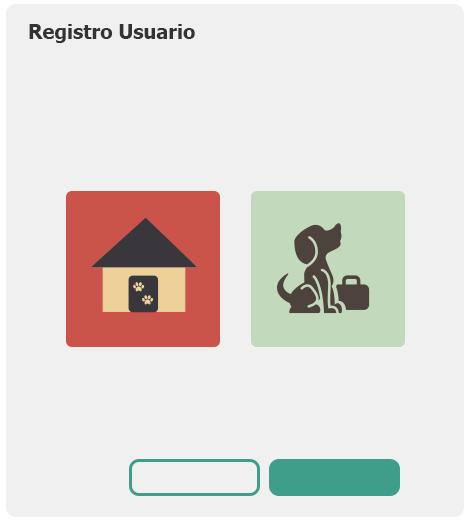
<style>
.page{position:relative;width:470px;height:520px;background:#f0f0f0}
.page>*{position:absolute;margin:0}
.t1{font:20px "Tahoma-Bold";color:#333333}
</style>
<div class="page">
<p class="t1" style="left:29px;top:24px;width:166px;height:19px">Registro Usuario</p>
</div>
